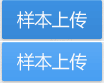
<style>
.page{position:relative;width:110px;height:83px}
.page>*{position:absolute;margin:0}
.t1{font:18px "MicrosoftYaHei";color:#f9f9fa}
</style>
<div class="page">
<p class="t1" style="left:17px;top:11px;width:70px;height:18px">样本上传</p>
<p class="t1" style="left:17px;top:53px;width:70px;height:18px">样本上传</p>
</div>
